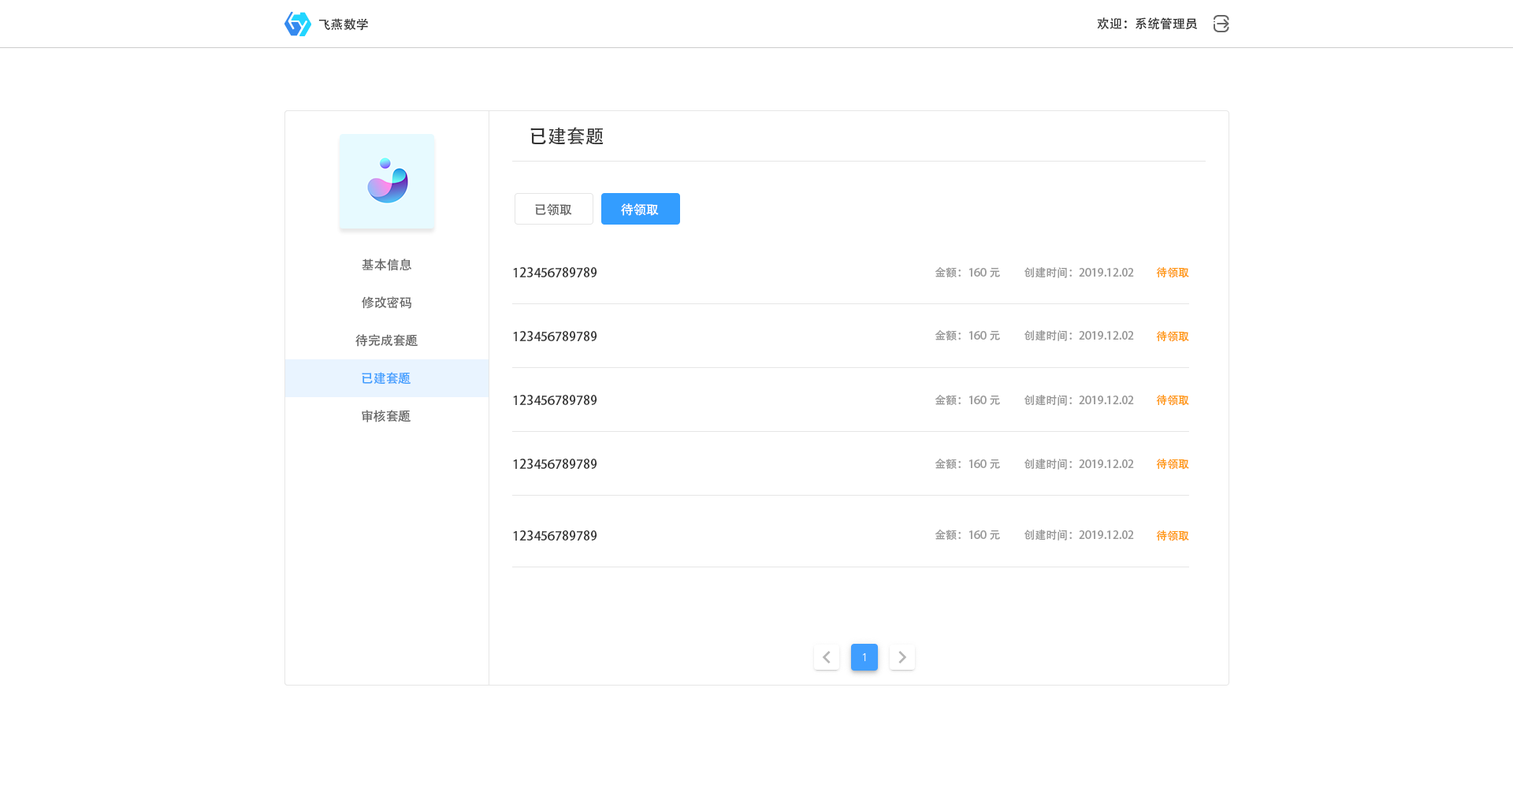
<style>
.page{position:relative;width:1513px;height:788px;background:#ffffff}
.page>*{position:absolute;margin:0}
.t1{font:12.6px "AdobeHeitiStd-Regular";color:#333333}
.t2{font:18.9px "AdobeHeitiStd-Regular";color:#333333}
.t3{font:12.6px "AdobeHeitiStd-Regular";color:#666666}
.t4{font:12.6px "AdobeHeitiStd-Regular";color:#ffffff}
.t5{font:11px "AdobeHeitiStd-Regular";color:#999999}
.t6{font:11px "AdobeHeitiStd-Regular";color:#ff9814}
.t7{font:12.6px "AdobeHeitiStd-Regular";color:#409eff}
</style>
<div class="page">
<p class="t1" style="left:1097px;top:17px;width:101px;height:13px">欢迎：系统管理员</p>
<p class="t1" style="left:318px;top:18px;width:50px;height:13px">飞燕数学</p>
<p class="t2" style="left:530px;top:127px;width:74px;height:18px">已建套题</p>
<p class="t3" style="left:535px;top:203px;width:37px;height:13px">已领取</p>
<p class="t4" style="left:621px;top:203px;width:38px;height:13px">待领取</p>
<p class="t3" style="left:362px;top:258px;width:50px;height:13px">基本信息</p>
<p class="t1" style="left:513px;top:267px;width:84px;height:10px">123456789789</p>
<p class="t5" style="left:935px;top:267px;width:65px;height:10px">金额：160元</p>
<p class="t5" style="left:1024px;top:267px;width:110px;height:11px">创建时间：2019.12.02</p>
<p class="t6" style="left:1156px;top:267px;width:33px;height:11px">待领取</p>
<p class="t3" style="left:362px;top:296px;width:49px;height:13px">修改密码</p>
<p class="t3" style="left:355px;top:334px;width:63px;height:13px">待完成套题</p>
<p class="t1" style="left:513px;top:331px;width:84px;height:10px">123456789789</p>
<p class="t5" style="left:935px;top:330px;width:65px;height:10px">金额：160元</p>
<p class="t5" style="left:1024px;top:330px;width:110px;height:11px">创建时间：2019.12.02</p>
<p class="t6" style="left:1156px;top:331px;width:33px;height:11px">待领取</p>
<p class="t7" style="left:362px;top:372px;width:49px;height:13px">已建套题</p>
<p class="t1" style="left:513px;top:395px;width:84px;height:10px">123456789789</p>
<p class="t5" style="left:935px;top:395px;width:65px;height:10px">金额：160元</p>
<p class="t5" style="left:1024px;top:395px;width:110px;height:11px">创建时间：2019.12.02</p>
<p class="t6" style="left:1156px;top:395px;width:33px;height:11px">待领取</p>
<p class="t3" style="left:362px;top:410px;width:49px;height:12px">审核套题</p>
<p class="t1" style="left:513px;top:459px;width:84px;height:10px">123456789789</p>
<p class="t5" style="left:935px;top:459px;width:65px;height:10px">金额：160元</p>
<p class="t5" style="left:1024px;top:459px;width:110px;height:11px">创建时间：2019.12.02</p>
<p class="t6" style="left:1156px;top:459px;width:33px;height:11px">待领取</p>
<p class="t1" style="left:513px;top:530px;width:84px;height:11px">123456789789</p>
<p class="t5" style="left:935px;top:530px;width:65px;height:10px">金额：160元</p>
<p class="t5" style="left:1024px;top:530px;width:110px;height:11px">创建时间：2019.12.02</p>
<p class="t6" style="left:1156px;top:530px;width:33px;height:11px">待领取</p>
</div>
